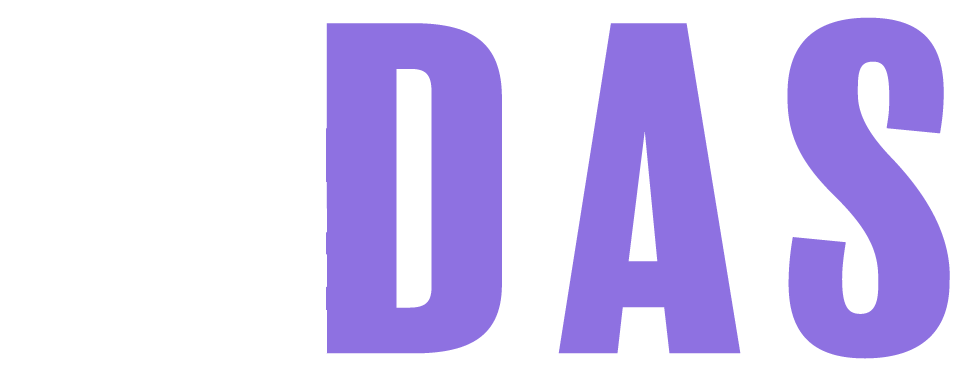
<style>
.page{position:relative;width:966px;height:382px;background:#ffffff}
.page>*{position:absolute;margin:0}
.t1{font:429.5px "BalboaPlus-Fill";color:#8e71e1;scale:1.23 1}
</style>
<div class="page">
<p class="t1" style="left:326px;top:17px;width:624px;height:342px">DAS</p>
</div>
